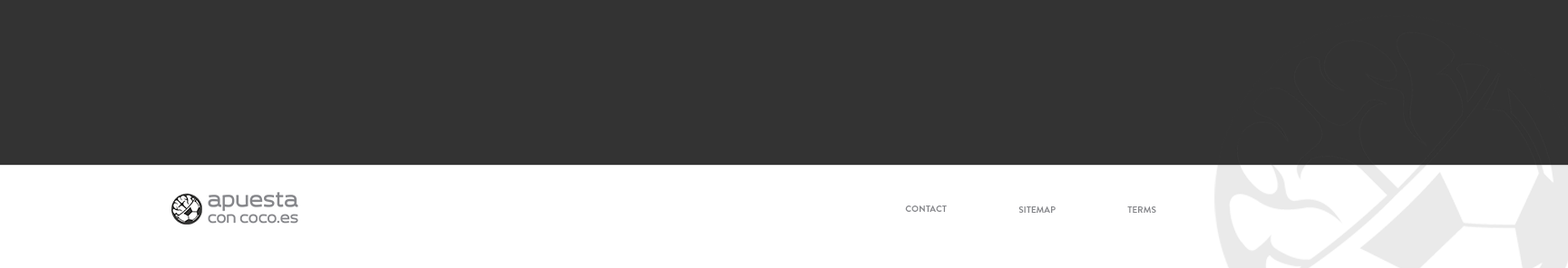
<style>
.page{position:relative;width:1568px;height:268px;background:#333333}
.page>*{position:absolute;margin:0}
.t1{font:9.1px "BrandonGrotesque-Bold";color:#85868a;text-transform:uppercase}
</style>
<div class="page">
<p class="t1" style="left:905px;top:206px;width:42px;height:6px">Contact</p>
<p class="t1" style="left:1018px;top:207px;width:38px;height:6px">Sitemap</p>
<p class="t1" style="left:1127px;top:207px;width:29px;height:6px">Terms</p>
</div>
